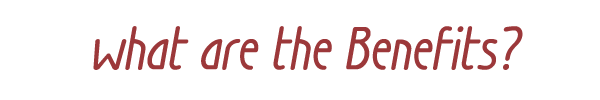
<style>
.page{position:relative;width:600px;height:100px;background:#ffffff}
.page>*{position:absolute;margin:0}
.t1{font:52.1px "Wien";color:#9c383a;font-weight:bold;font-style:italic}
</style>
<div class="page">
<p class="t1" style="left:93px;top:26px;width:430px;height:44px">what are the Benefits?</p>
</div>
